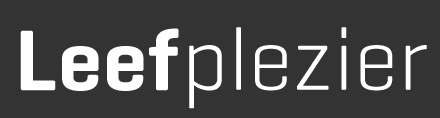
<style>
.page{position:relative;width:440px;height:118px;background:#333333}
.page>*{position:absolute;margin:0}
.t1{font:87.6px "Geogrotesque-SemiBold";color:#ffffff}
.t2{font:89.4px "Geogrotesque-Light";color:#ffffff}
</style>
<div class="page">
<p class="t1" style="left:20px;top:28px;width:159px;height:63px">Leef</p>
<p class="t2" style="left:189px;top:27px;width:238px;height:82px">plezier</p>
</div>
